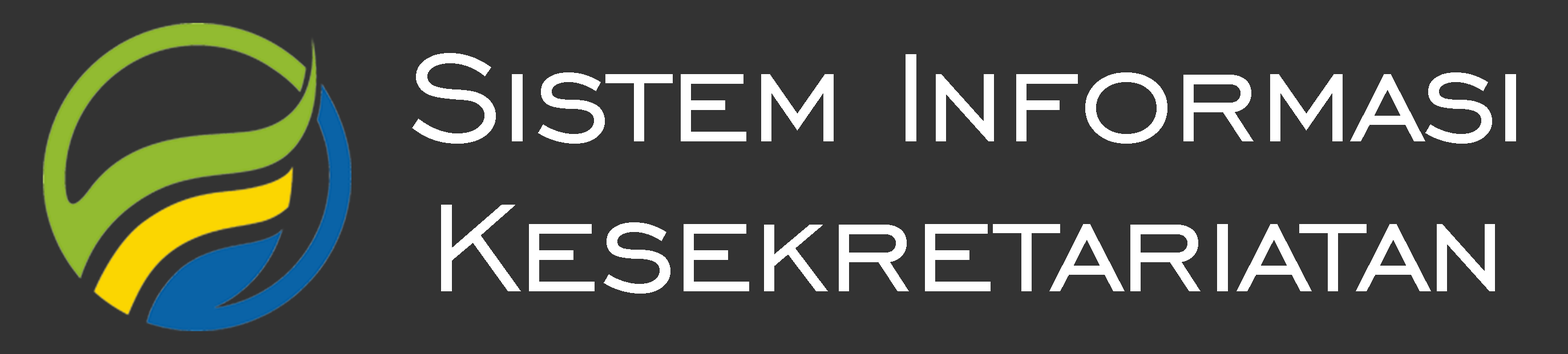
<style>
.page{position:relative;width:1568px;height:354px;background:#333333}
.page>*{position:absolute;margin:0}
.t1{font:160.9px "EngraversGothicBT-Regular";letter-spacing:-0.025em;color:#ffffff}
</style>
<div class="page">
<p class="t1" style="left:412px;top:53px;width:1104px;height:91px">Sistem Informasi</p>
<p class="t1" style="left:441px;top:205px;width:1054px;height:89px">Kesekretariatan</p>
</div>
